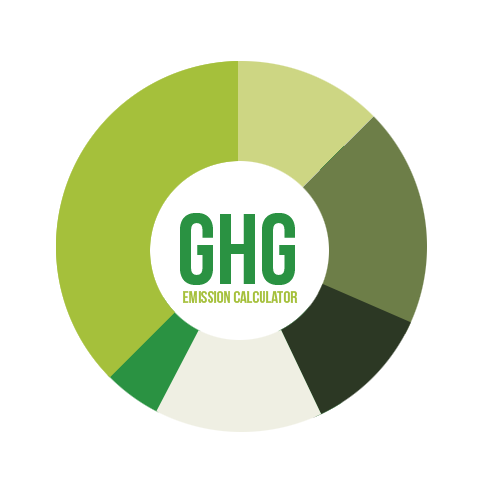
<style>
.page{position:relative;width:500px;height:500px;background:#ffffff}
.page>*{position:absolute;margin:0}
.t1{font:100px "BebasNeue";color:#2a9242}
.t2{font:16.8px "BebasNeue";color:#a5c03b}
</style>
<div class="page">
<p class="t1" style="left:180px;top:213px;width:115px;height:72px">GHG</p>
<p class="t2" style="left:183px;top:291px;width:115px;height:12px">Emission Calculator</p>
</div>
